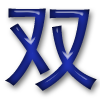
<style>
.page{position:relative;width:100px;height:100px;background:#ffffff}
.page>*{position:absolute;margin:0}
.t1{font:100px "AdobeHeitiStd-Regular"}
</style>
<div class="page">
<p class="t1" style="left:5px;top:8px;width:92px;height:83px">双</p>
</div>
